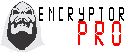
<style>
.page{position:relative;width:125px;height:53px;background:#ffffff}
.page>*{position:absolute;margin:0}
.t1{font:21px/12.6px "Digital-7";letter-spacing:0.26em;color:#000000;text-transform:uppercase;scale:0.61 1}
.t2{font:38px/12.6px "Digital-7";letter-spacing:0.26em;color:#ff0000;text-transform:uppercase;scale:0.61 1}
</style>
<div class="page">
<p class="t1" style="left:39px;top:7px;width:85px;height:39px">Encryptor<br> <br>    <span class="t2">PRO</span></p>
</div>
